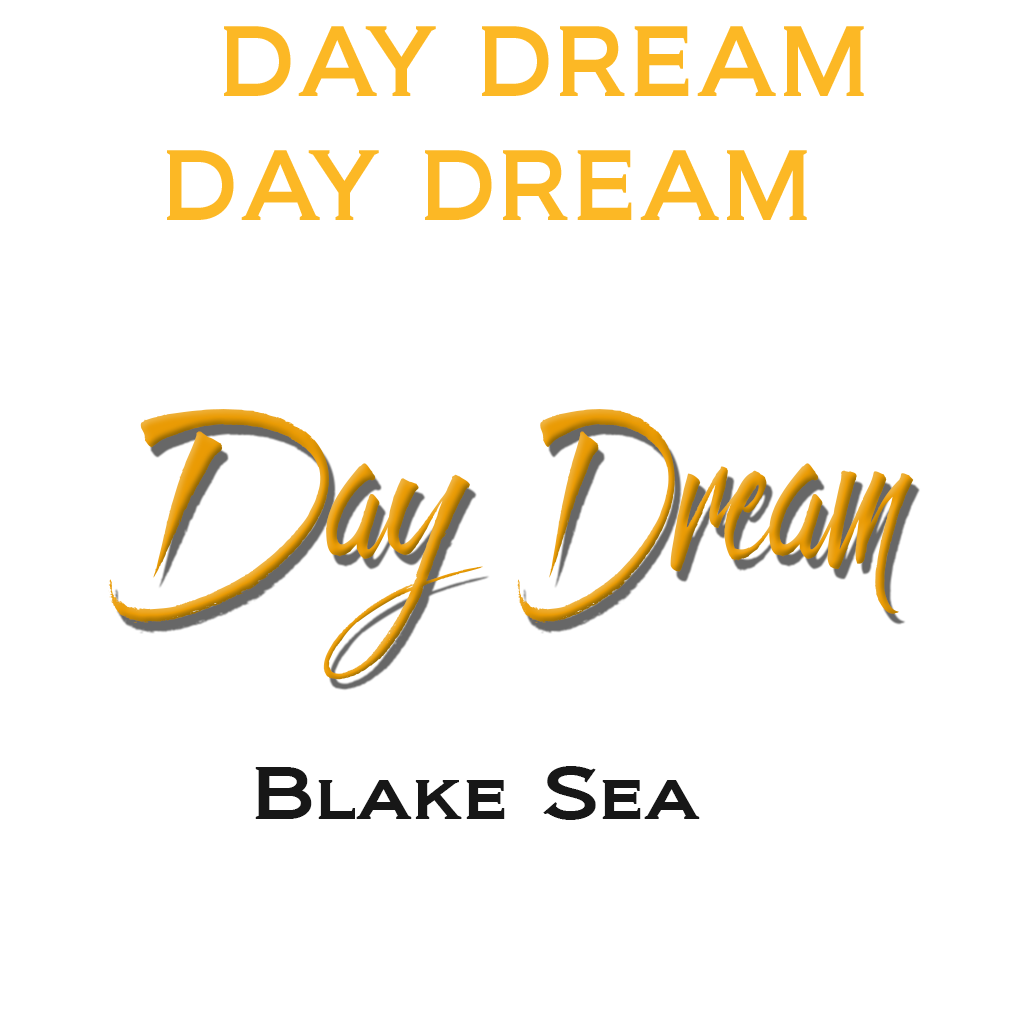
<style>
.page{position:relative;width:1024px;height:1024px;background:#ffffff}
.page>*{position:absolute;margin:0}
.t1{font:93.9px "Biondi";letter-spacing:0.05em;color:#fcb00d;scale:0.85 1}
.t2{font:174.9px "FreshScript";scale:0.8 1}
.t3{font:174.9px "FreshScript";scale:1.12 1}
.t4{font:174.9px "FreshScript";scale:0.96 1}
.t5{font:70.1px "Biondi";color:#0f0f0f;scale:1.08 1}
</style>
<div class="page">
<p class="t1" style="left:224px;top:26px;width:640px;height:70px;opacity:0.9">DAY DREAM</p>
<p class="t1" style="left:167px;top:150px;width:640px;height:70px;opacity:0.9">DAY DREAM</p>
<p class="t2" style="left:108px;top:409px;width:806px;height:271px"><span class="t3">D</span>a<span class="t4">y</span>  Dream</p>
<p class="t5" style="left:255px;top:766px;width:445px;height:54px;opacity:0.97">Blake Sea</p>
</div>
